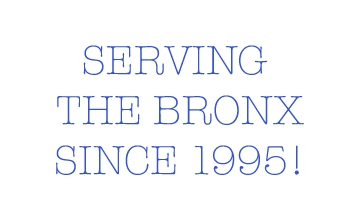
<style>
.page{position:relative;width:360px;height:220px;background:#ffffff}
.page>*{position:absolute;margin:0}
.t1{font:41.7px "AmericanTypewriter-Light";color:#3454d1}
</style>
<div class="page">
<p class="t1" style="left:56px;top:45px;width:248px;height:130px;text-align:center">SERVING <br>THE BRONX<br>SINCE 1995!</p>
</div>
